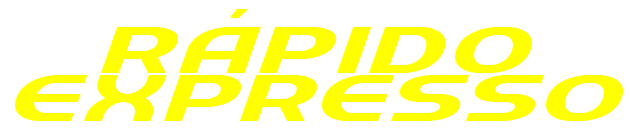
<style>
.page{position:relative;width:630px;height:136px;background:#ffffff}
.page>*{position:absolute;margin:0}
.t1{font:72px "MyriadPro-BoldIt";letter-spacing:0.2em;color:#ffff00;text-transform:uppercase}
.t2{font:72px/48px "QuickExpress";letter-spacing:0.03em;color:#ffff00;text-transform:uppercase}
.t3{font:72px/48px "QuickExpress";letter-spacing:0.05em;color:#ffff00;text-transform:uppercase}
</style>
<div class="page">
<p class="t1" style="left:230px;top:9px;width:19px;height:9px">´</p>
<p class="t2" style="left:15px;top:27px;width:608px;height:94px;text-align:center"><span class="t3">RAPIDO<br></span>EXPRESSO</p>
</div>
